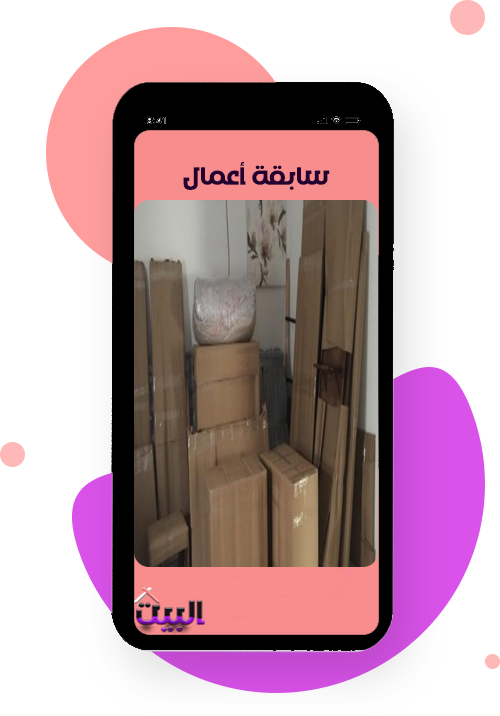
<style>
.page{position:relative;width:500px;height:716px;background:#ffffff}
.page>*{position:absolute;margin:0}
.t1{font:27px "VEXA";color:#22002f}
</style>
<div class="page">
<p class="t1" style="left:183px;top:161px;width:147px;height:29px">سابقة أعمال</p>
</div>
